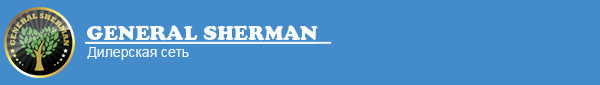
<style>
.page{position:relative;width:600px;height:85px;background:#438bca}
.page>*{position:absolute;margin:0}
.t1{font:20px "CooperBlackStd";color:#f8fafc;text-decoration:underline}
.t2{font:14px "ArialMT";color:#edf7ff}
</style>
<div class="page">
<p class="t1" style="left:86px;top:25px;width:232px;height:19px">GENERAL SHERMAN</p>
<p class="t2" style="left:87px;top:47px;width:102px;height:13px">Дилерская сеть</p>
</div>
